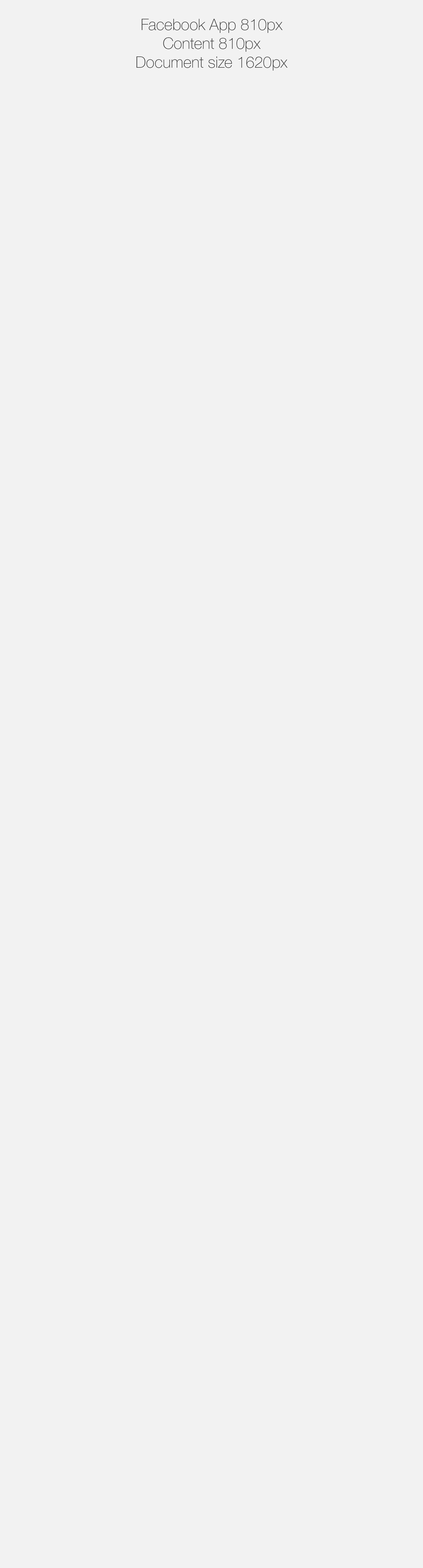
<style>
.page{position:relative;width:423px;height:1568px;background:#f2f2f2}
.page>*{position:absolute;margin:0}
.t1{font:15.7px "HelveticaNeue-Thin";color:#373737}
</style>
<div class="page">
<p class="t1" style="left:136px;top:19px;width:152px;height:52px;text-align:center">Facebook App 810px<br>Content 810px<br>Document size 1620px</p>
</div>
